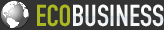
<style>
.page{position:relative;width:164px;height:30px;background:#333333}
.page>*{position:absolute;margin:0}
.t1{font:30px "DINEngschriftStd";color:#ffffff}
.t2{font:30px "DINEngschriftStd";color:#abb820}
</style>
<div class="page">
<p class="t1" style="left:37px;top:4px;width:127px;height:23px"><span class="t2">ECO</span>BUSINESS</p>
</div>
